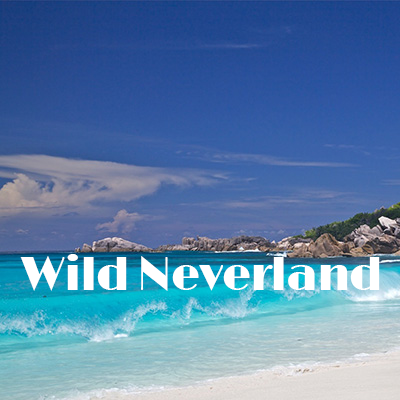
<style>
.page{position:relative;width:400px;height:400px}
.page>*{position:absolute;margin:0}
.t1{font:46px "Limelight-Regular";letter-spacing:-0.025em;color:#ffffff}
</style>
<div class="page">
<p class="t1" style="left:20px;top:254px;width:360px;height:37px">Wild Neverland</p>
</div>
